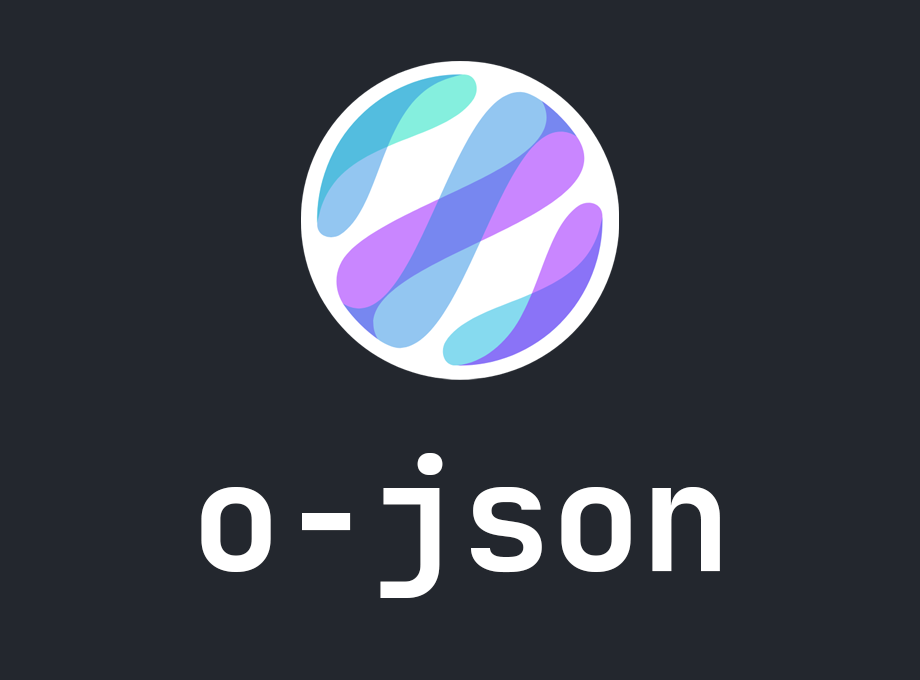
<style>
.page{position:relative;width:920px;height:680px;background:#23272e}
.page>*{position:absolute;margin:0}
.t1{font:150px "JetBrainsMono-Bold";color:#ffffff}
</style>
<div class="page">
<p class="t1" style="left:201px;top:453px;width:519px;height:145px">o-json</p>
</div>
